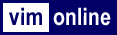
<style>
.page{position:relative;width:117px;height:35px;background:#000066}
.page>*{position:absolute;margin:0}
.t1{font:24px "ArialNarrow-Bold";color:#000066}
.t2{font:24px "ArialNarrow-Bold";color:#ffffff}
</style>
<div class="page">
<p class="t1" style="left:9px;top:7px;width:33px;height:18px">vim</p>
<p class="t2" style="left:53px;top:7px;width:58px;height:19px">online</p>
</div>
